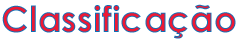
<style>
.page{position:relative;width:237px;height:44px;background:#ffffff}
.page>*{position:absolute;margin:0}
.t1{font:36px "CenturyGothic-Bold"}
</style>
<div class="page">
<p class="t1" style="left:2px;top:4px;width:234px;height:35px">Classificação</p>
</div>
